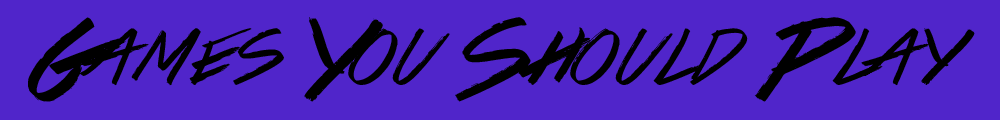
<style>
.page{position:relative;width:1000px;height:120px;background:#5025ca}
.page>*{position:absolute;margin:0}
.t1{font:81px "ColorsOfAutumn";color:#000000}
</style>
<div class="page">
<p class="t1" style="left:28px;top:17px;width:947px;height:85px">Games You Should Play</p>
</div>
